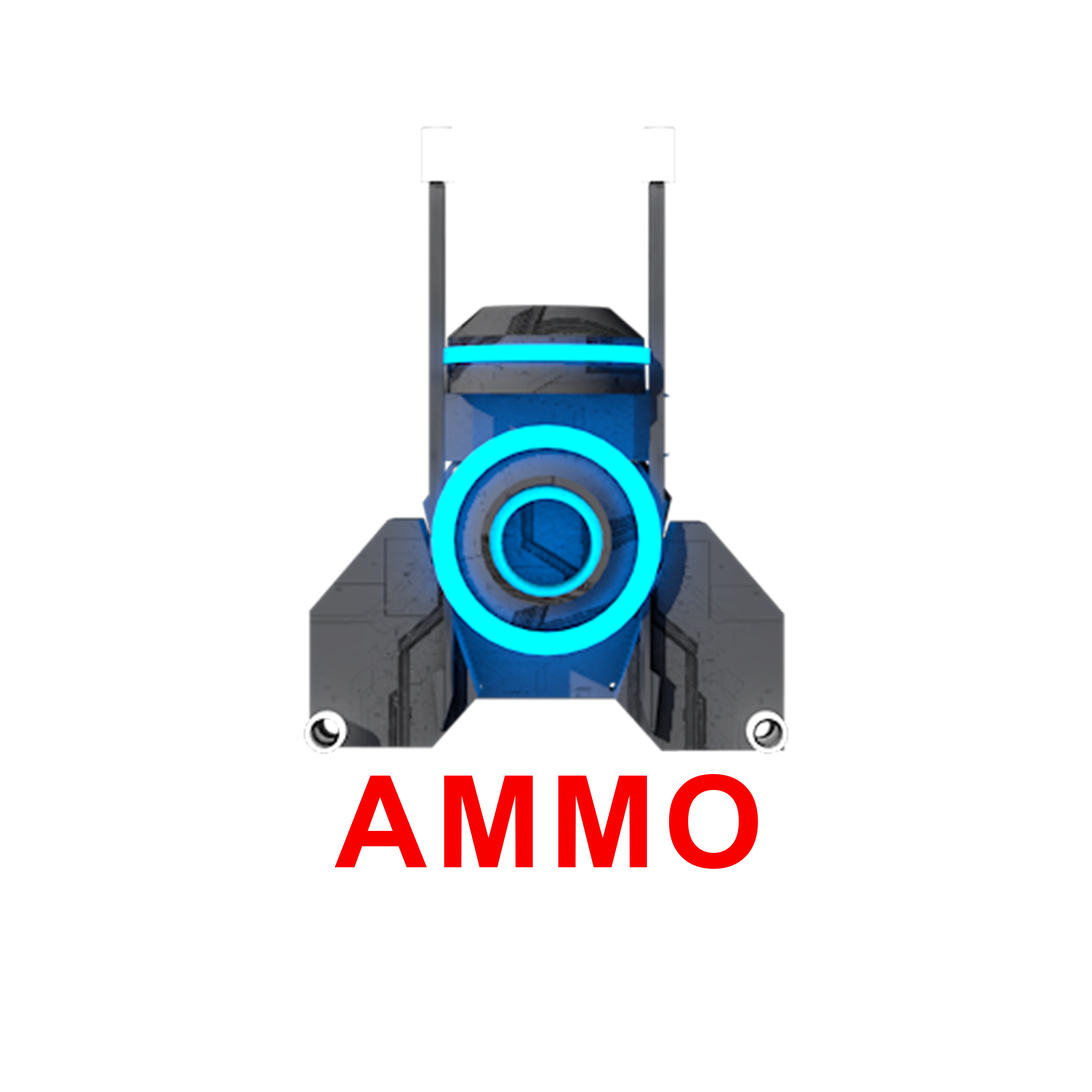
<style>
.page{position:relative;width:1092px;height:1092px;background:#ffffff}
.page>*{position:absolute;margin:0}
.t1{font:128px "Arial-BoldMT";letter-spacing:0.025em;color:#f90000;text-transform:uppercase}
</style>
<div class="page">
<p class="t1" style="left:334px;top:774px;width:424px;height:95px">AMMO</p>
</div>
